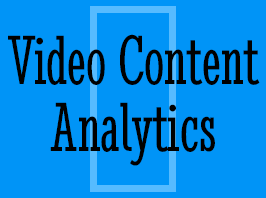
<style>
.page{position:relative;width:266px;height:198px;background:#0094f7}
.page>*{position:absolute;margin:0}
.t1{font:72px "StintUltraCondensed-Regular";color:#000000}
</style>
<div class="page">
<p class="t1" style="left:8px;top:34px;width:252px;height:51px">Video Content</p>
<p class="t1" style="left:50px;top:102px;width:165px;height:64px">Analytics</p>
</div>
